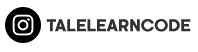
<style>
.page{position:relative;width:198px;height:52px;background:#ffffff}
.page>*{position:absolute;margin:0}
.t1{font:15.8px "Kamerik205-Regular3";color:#2f322e;text-transform:uppercase;font-weight:bold}
</style>
<div class="page">
<p class="t1" style="left:46px;top:19px;width:145px;height:13px">TaleLearnCode</p>
</div>
